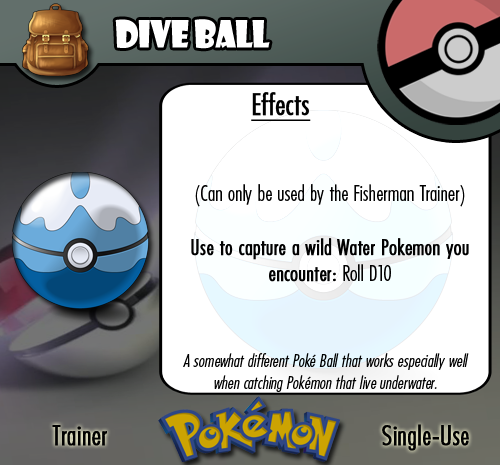
<style>
.page{position:relative;width:500px;height:465px;background:#ffffff}
.page>*{position:absolute;margin:0}
.t1{font:36.7px "ShowcardGothic-Reg";letter-spacing:-0.025em;color:#ffffff;scale:0.91 1}
.t2{font:22.2px "FuturaCondensedBQ-Light";color:#010101;font-weight:bold}
.t3{font:27.8px "FuturaCondensedBQ-Light";color:#010101;font-weight:bold}
.t4{font:30.6px "FuturaCondensedBQ-Light";color:#010101;font-weight:bold;text-decoration:underline}
.t5{font:22.2px "FuturaCondensedBQ-Light";color:#010101}
.t6{font:18.1px "FuturaCondensedBQ-Light";color:#010101;font-style:italic}
</style>
<div class="page">
<p class="t1" style="left:115px;top:19px;width:155px;height:30px">Dive Ball</p>
<p class="t2" style="left:191px;top:92px;width:278px;height:190px"><span class="t3">  </span><span class="t4">Effects<br><br><br><br></span><span class="t5">(Can only be used by the Fisherman Trainer)<br></span><br>Use to capture a wild Water Pokemon you encounter: <span class="t5">Roll D10</span></p>
<p class="t6" style="left:183px;top:353px;width:286px;height:39px;text-align:center">A somewhat different Poké Ball that works especially well when catching Pokémon that live underwater.</p>
<p class="t3" style="left:52px;top:425px;width:55px;height:21px">Trainer</p>
<p class="t3" style="left:382px;top:424px;width:87px;height:27px">Single-Use</p>
</div>
